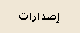
<style>
.page{position:relative;width:80px;height:33px;background:#f0e7d6}
.page>*{position:absolute;margin:0}
.t1{font:11px "Tahoma-Bold";color:#000000}
</style>
<div class="page">
<p class="t1" style="left:19px;top:13px;width:40px;height:10px">إصدارات</p>
</div>
